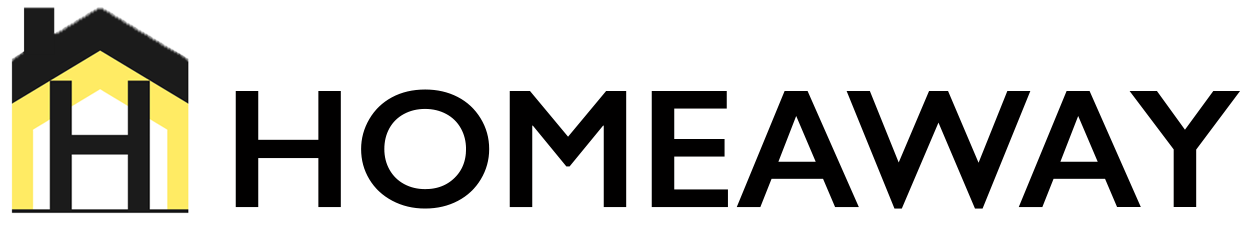
<style>
.page{position:relative;width:1249px;height:225px;background:#ffffff}
.page>*{position:absolute;margin:0}
.t1{font:170px "GillSans-SemiBold";color:#010000}
</style>
<div class="page">
<p class="t1" style="left:235px;top:89px;width:1005px;height:120px">HOMEAWAY</p>
</div>
